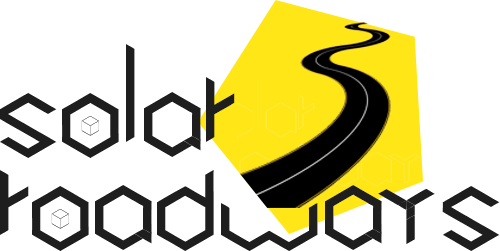
<style>
.page{position:relative;width:500px;height:251px;background:#ffffff}
.page>*{position:absolute;margin:0}
.t1{font:77.5px "Cubic";color:#1e1e1e}
</style>
<div class="page">
<p class="t1" style="left:0px;top:44px;width:500px;height:207px">SOLAR<br>ROADWAYS</p>
</div>
